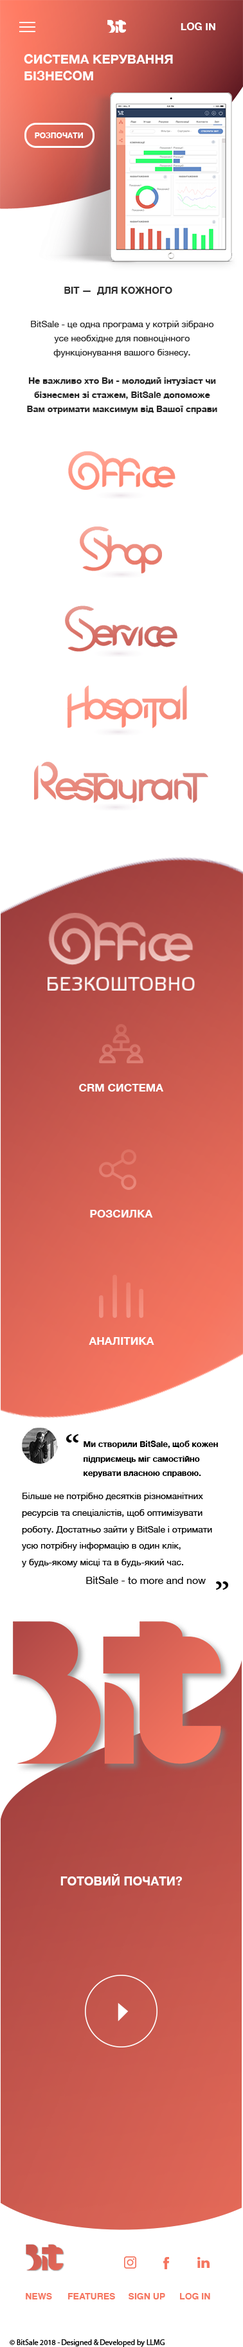
<style>
.page{position:relative;width:243px;height:2347px;background:#ffffff}
.page>*{position:absolute;margin:0}
.t1{font:10.3px "HelveticaNeue-Bold";color:#ffffff}
.t2{font:12.9px/16.7px "HelveticaNeue-Bold";color:#ffffff}
.t3{font:7.7px "HelveticaNeue-Bold";color:#ffffff}
.t4{font:9.6px "Helvetica-Bold";color:#2f2f2f;font-variant:small-caps}
.t5{font:9px/14.1px "HelveticaNeue-Bold";color:#262626}
.t6{font:9px/14.1px "HelveticaNeue";color:#262626}
.t7{font:10.9px "HelveticaNeue-Bold";color:#ffffff;font-variant:small-caps}
.t8{font:8.4px/14.7px "HelveticaNeue-Bold";color:#000000}
.t9{font:9px/16.6px "HelveticaNeue";color:#000000}
.t10{font:10.3px "HelveticaNeue";color:#000000}
.t11{font:12.2px "HelveticaNeue-Bold";color:#ffffff}
.t12{font:9px "Helvetica-Bold";color:#f5755f;font-variant:small-caps}
.t13{font:7.7px "MyriadPro-Regular";color:#000000}
</style>
<div class="page">
<p class="t1" style="left:181px;top:22px;width:34px;height:8px">LOG IN</p>
<p class="t2" style="left:24px;top:54px;width:149px;height:26px">СИСТЕМА КЕРУВАННЯ<br>БІЗНЕСОМ</p>
<p class="t3" style="left:35px;top:132px;width:48px;height:6px">РОЗПОЧАТИ</p>
<p class="t4" style="left:64px;top:287px;width:108px;height:8px">BIT —  ДЛЯ КОЖНОГО</p>
<p class="t5" style="left:27px;top:321px;width:190px;height:93px;text-align:center"><span class="t6">BitSale - це одна програма у котрій зібрано усе необхідне для повноцінного функціонування вашого бізнесу. <br></span><br>Не важливо хто Ви - молодий інтузіаст чи бізнесмен зі стажем, BitSale допоможе Вам отримати максимум від Вашої справи</p>
<p class="t7" style="left:79px;top:1084px;width:84px;height:8px">CRM СИСТЕМА</p>
<p class="t7" style="left:90px;top:1210px;width:63px;height:8px">РОЗСИЛКА</p>
<p class="t7" style="left:89px;top:1337px;width:65px;height:8px">АНАЛІТИКА</p>
<p class="t8" style="left:84px;top:1441px;width:134px;height:36px">Ми створили BitSale, щоб кожен підприємець міг самостійно керувати власною справою.</p>
<p class="t9" style="left:22px;top:1493px;width:190px;height:74px">Більше не потрібно десятків різноманітних ресурсів та спеціалістів, щоб оптимізувати роботу. Достатньо зайти у BitSale і отримати усю потрібну інформацію в один клік, <br>у будь-якому місці та в будь-який час.</p>
<p class="t10" style="left:86px;top:1576px;width:120px;height:8px">BitSale - to more and now</p>
<p class="t11" style="left:60px;top:1874px;width:122px;height:11px">ГОТОВИЙ ПОЧАТИ?</p>
<p class="t12" style="left:26px;top:2293px;width:26px;height:6px">NEWS</p>
<p class="t12" style="left:68px;top:2293px;width:47px;height:6px">FEATURES</p>
<p class="t12" style="left:129px;top:2293px;width:36px;height:6px">SIGN UP</p>
<p class="t12" style="left:180px;top:2293px;width:30px;height:6px">LOG IN</p>
<p class="t13" style="left:10px;top:2339px;width:155px;height:8px">© BitSale 2018 - Designed &amp; Developed by LLMG</p>
</div>
